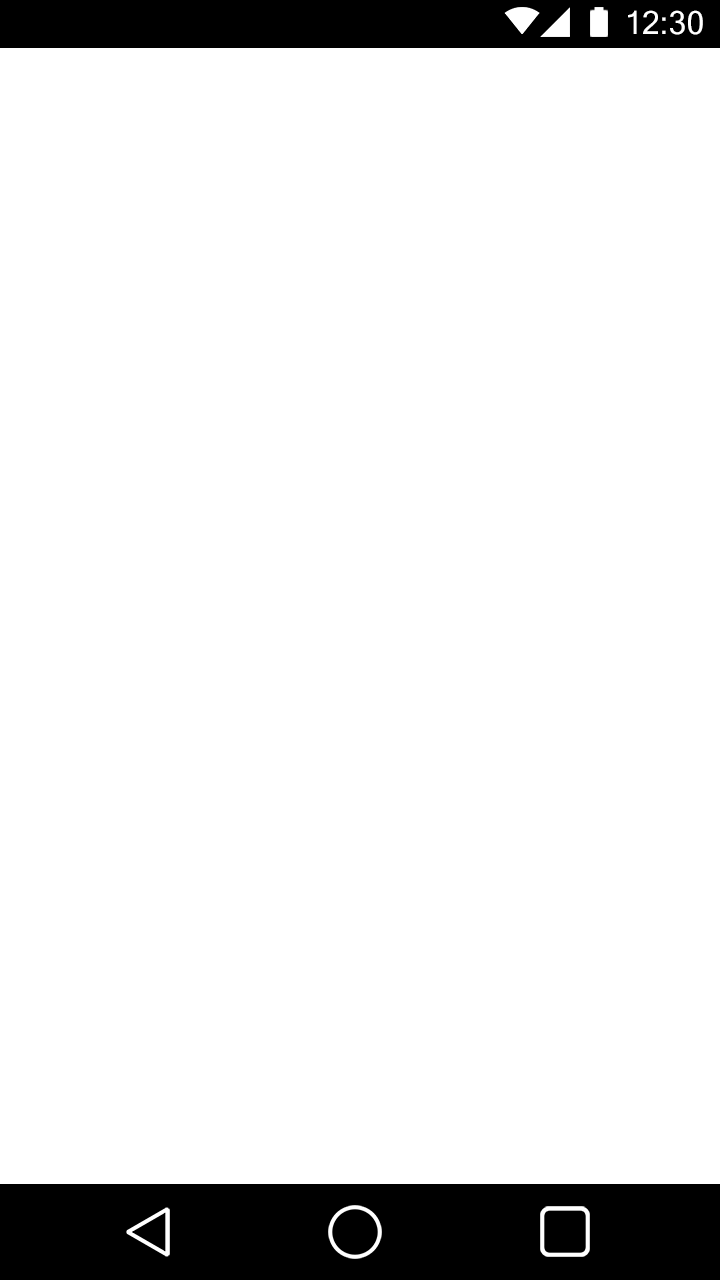
<style>
.page{position:relative;width:720px;height:1280px;background:#ffffff}
.page>*{position:absolute;margin:0}
.t1{font:30.7px "Kartika";color:#ffffff}
</style>
<div class="page">
<p class="t1" style="left:628px;top:10px;width:75px;height:25px">12:30</p>
</div>
